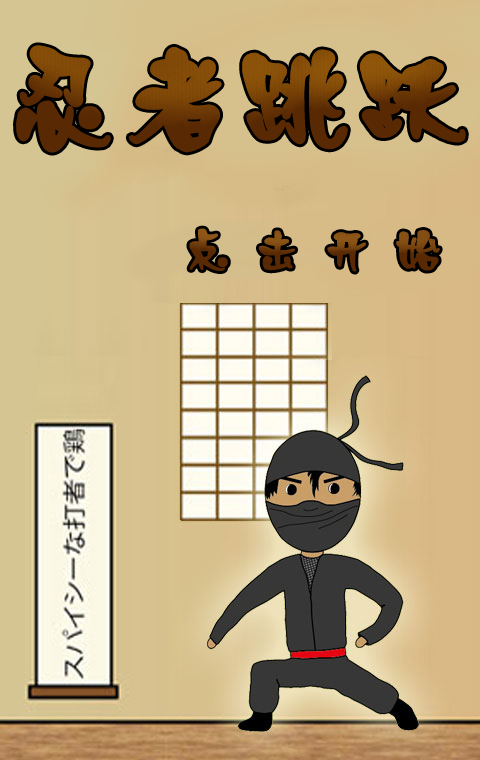
<style>
.page{position:relative;width:480px;height:760px}
.page>*{position:absolute;margin:0}
.t1{font:115.3px "Pop3EG-Extra-GB";font-weight:bold}
.t2{font:48px "Pop3EG-Extra-GB";color:#592903;font-weight:bold}
</style>
<div class="page">
<p class="t1" style="left:16px;top:45px;width:450px;height:108px">忍者跳跃</p>
<p class="t2" style="left:189px;top:228px;width:251px;height:44px">点 击 开 始</p>
</div>
